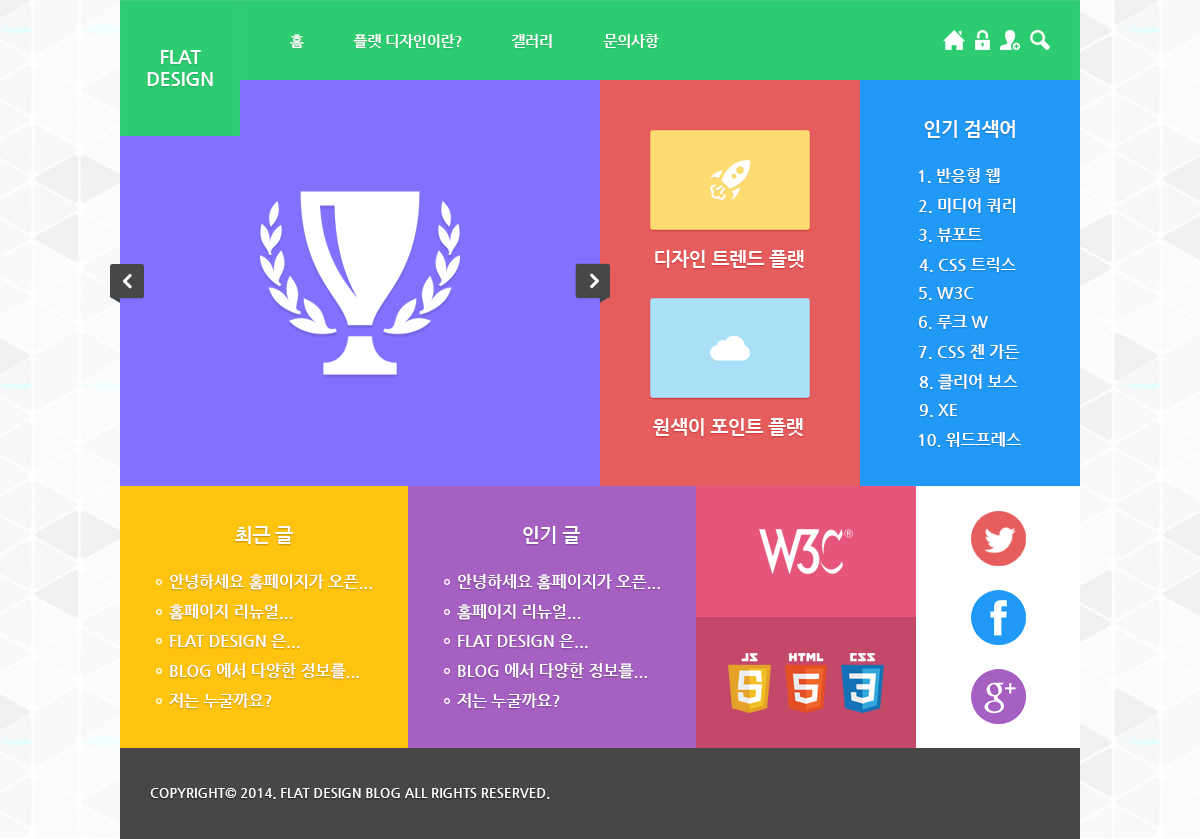
<style>
.page{position:relative;width:1200px;height:839px}
.page>*{position:absolute;margin:0}
.t1{font:14.7px "NanumGothicBold";color:#ffffff}
.t2{font:18.7px "NanumGothicBold";color:#ffffff}
.t3{font:16px "NanumGothicBold";color:#ffffff}
.t4{font:13.3px "NanumGothicBold";color:#ffffff}
</style>
<div class="page">
<p class="t1" style="left:290px;top:34px;width:14px;height:15px">홈</p>
<p class="t1" style="left:353px;top:34px;width:109px;height:15px">플랫 디자인이란?</p>
<p class="t1" style="left:512px;top:34px;width:40px;height:14px">갤러리</p>
<p class="t1" style="left:603px;top:34px;width:56px;height:14px">문의사항</p>
<p class="t2" style="left:147px;top:50px;width:66px;height:36px;text-align:center">FLAT<br>DESIGN</p>
<p class="t2" style="left:924px;top:120px;width:91px;height:18px">인기 검색어</p>
<p class="t3" style="left:919px;top:168px;width:81px;height:15px">1. 반응형 웹</p>
<p class="t3" style="left:918px;top:198px;width:98px;height:15px">2. 미디어 쿼리</p>
<p class="t3" style="left:918px;top:228px;width:64px;height:14px">3. 뷰포트</p>
<p class="t2" style="left:655px;top:250px;width:149px;height:18px">디자인 트렌드 플랫</p>
<p class="t3" style="left:919px;top:257px;width:97px;height:15px">4. CSS 트릭스</p>
<p class="t3" style="left:919px;top:287px;width:55px;height:13px">5. W3C</p>
<p class="t3" style="left:918px;top:315px;width:70px;height:14px">6. 루크 W</p>
<p class="t3" style="left:918px;top:344px;width:102px;height:15px">7. CSS 젠 가든</p>
<p class="t3" style="left:919px;top:374px;width:99px;height:16px">8. 클리어 보스</p>
<p class="t3" style="left:919px;top:404px;width:38px;height:13px">9. XE</p>
<p class="t2" style="left:653px;top:418px;width:150px;height:18px">원색이 포인트 플랫</p>
<p class="t3" style="left:919px;top:432px;width:102px;height:15px">10. 워드프레스</p>
<p class="t2" style="left:235px;top:526px;width:58px;height:18px">최근 글</p>
<p class="t2" style="left:523px;top:526px;width:57px;height:18px">인기 글</p>
<p class="t3" style="left:170px;top:574px;width:202px;height:16px">안녕하세요 홈페이지가 오픈...</p>
<p class="t3" style="left:458px;top:574px;width:202px;height:16px">안녕하세요 홈페이지가 오픈...</p>
<p class="t3" style="left:169px;top:604px;width:124px;height:16px">홈페이지 리뉴얼...</p>
<p class="t3" style="left:457px;top:604px;width:124px;height:16px">홈페이지 리뉴얼...</p>
<p class="t3" style="left:170px;top:634px;width:130px;height:14px">FLAT DESIGN 은...</p>
<p class="t3" style="left:458px;top:634px;width:130px;height:14px">FLAT DESIGN 은...</p>
<p class="t3" style="left:170px;top:663px;width:189px;height:16px">BLOG 에서 다양한 정보를...</p>
<p class="t3" style="left:458px;top:663px;width:189px;height:16px">BLOG 에서 다양한 정보를...</p>
<p class="t3" style="left:169px;top:693px;width:103px;height:15px">저는 누굴까요?</p>
<p class="t3" style="left:457px;top:693px;width:103px;height:15px">저는 누굴까요?</p>
<p class="t4" style="left:150px;top:788px;width:400px;height:11px">COPYRIGHT© 2014. FLAT DESIGN BLOG ALL RIGHTS RESERVED.</p>
</div>
